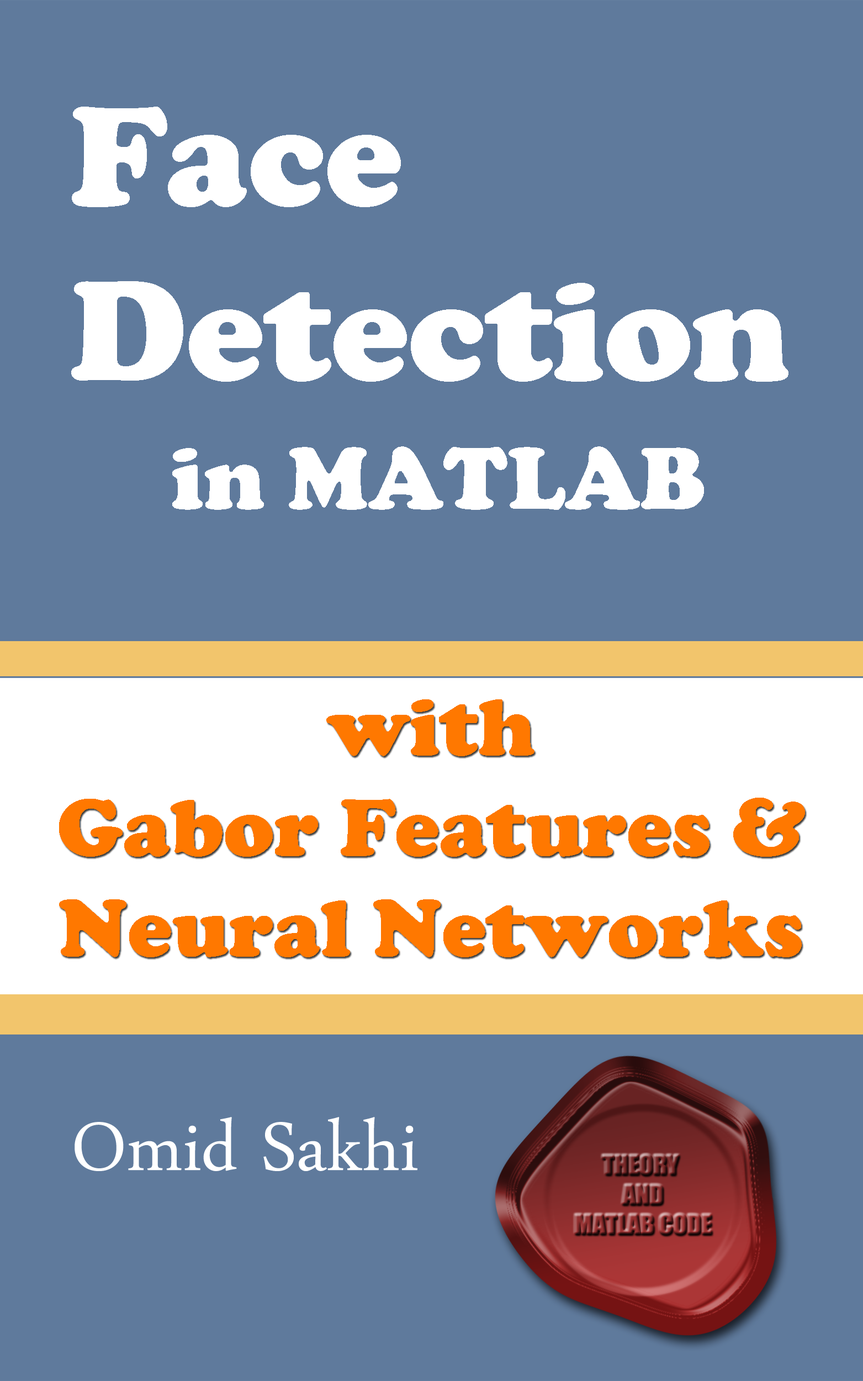
<style>
.page{position:relative;width:863px;height:1381px;background:#5f7a9c}
.page>*{position:absolute;margin:0}
.t1{font:145.8px "CooperBlack";color:#ffffff}
.t2{font:91.1px "CooperBlack";color:#ffffff}
.t3{font:83.7px "CooperBlack";color:#ff7800}
.t4{font:100.4px "DaunPenh";color:#ffffff}
</style>
<div class="page">
<p class="t1" style="left:71px;top:107px;width:718px;height:275px">Face <br>Detection</p>
<p class="t2" style="left:172px;top:446px;width:532px;height:64px">in MATLAB</p>
<p class="t3" style="left:59px;top:699px;width:746px;height:258px;text-align:center">with<br>Gabor Features &amp;<br>Neural Networks</p>
<p class="t4" style="left:75px;top:1117px;width:343px;height:54px">Omid Sakhi</p>
</div>
